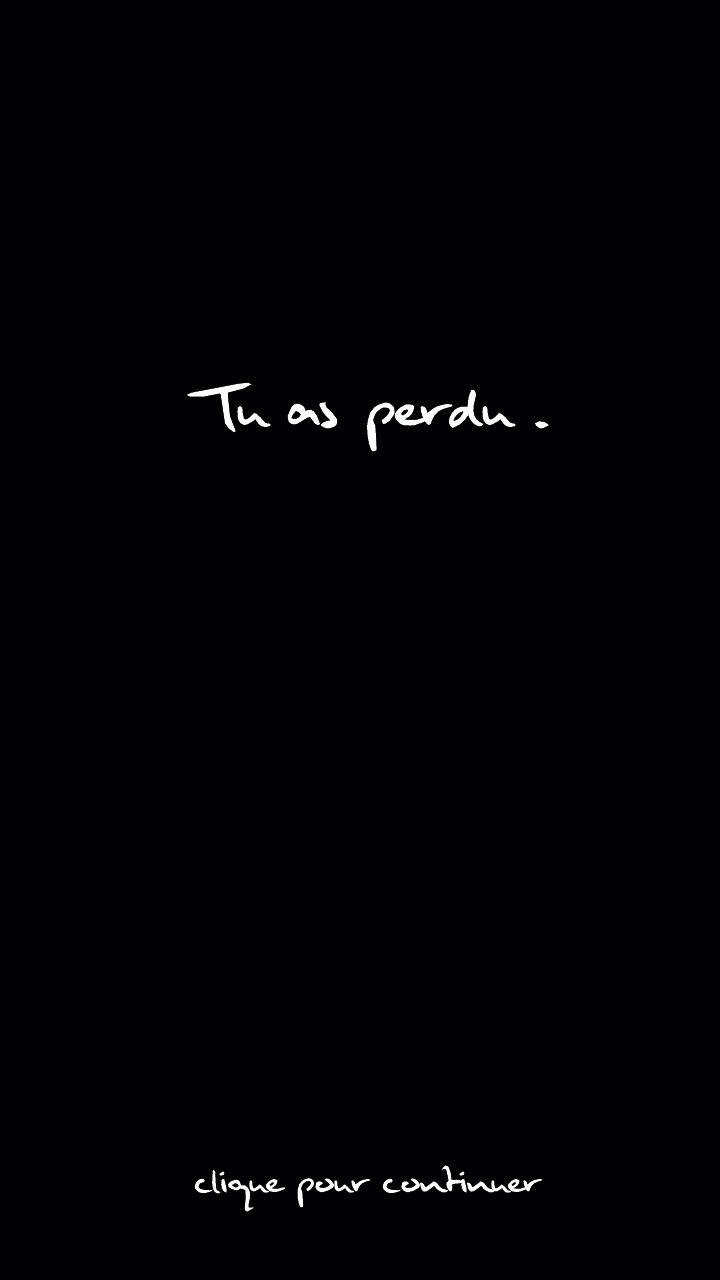
<style>
.page{position:relative;width:720px;height:1280px;background:#010103}
.page>*{position:absolute;margin:0}
.t1{font:36px "Muldershandwriting";color:#ffffff}
.t2{font:60px "Muldershandwriting";color:#ffffff}
</style>
<div class="page">
<p class="t1" style="left:186px;top:382px;width:363px;height:830px;text-align:center"><span class="t2"><br><br><br><br>Tu as perdu .<br><br><br><br><br><br><br><br><br><br><br></span>clique pour continuer</p>
</div>
